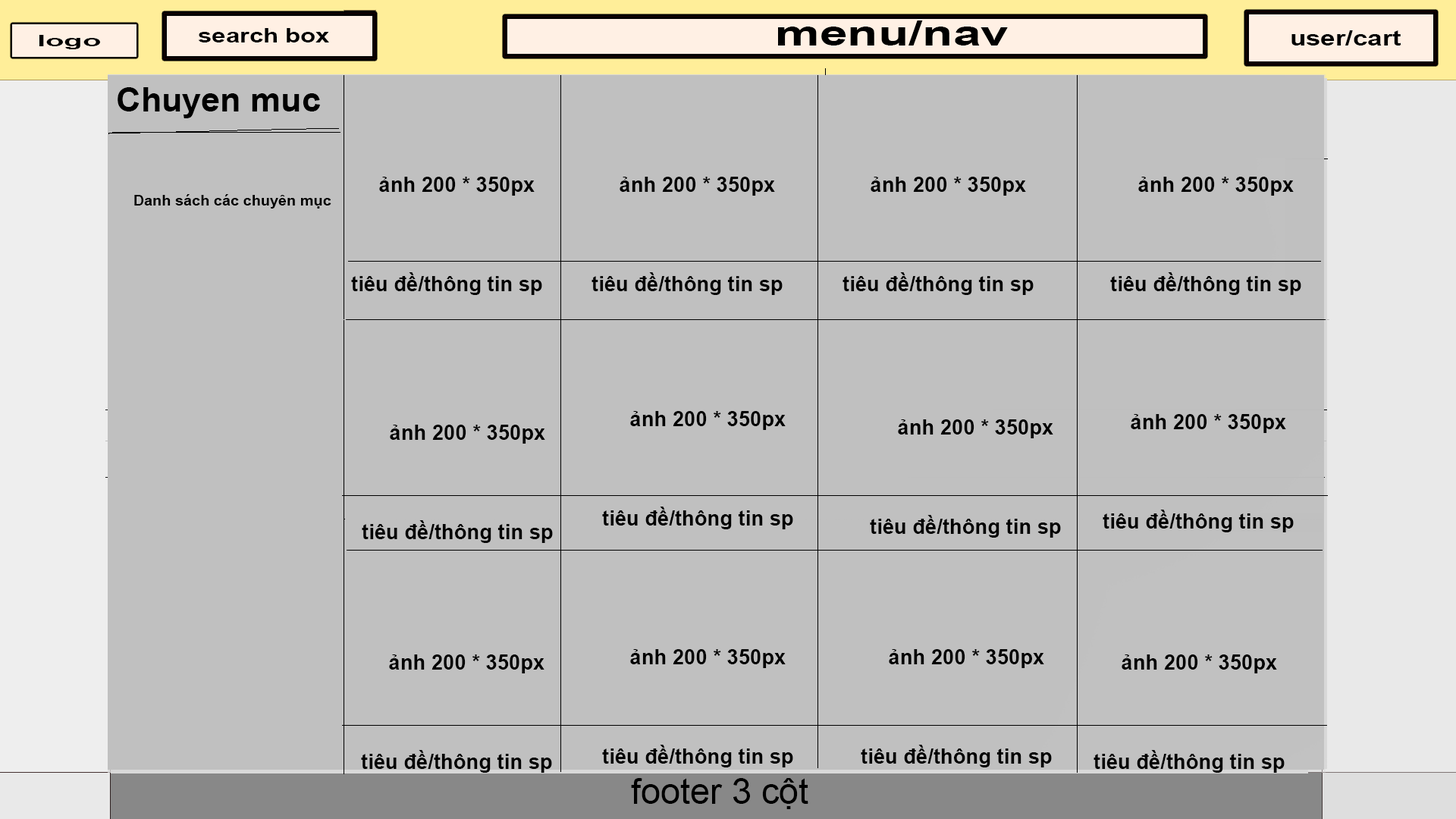
<style>
.page{position:relative;width:1456px;height:819px;background:#c0c0c0}
.page>*{position:absolute;margin:0}
.t1{font:19.7px "Arial-BoldMT";color:#000000;scale:1.27 1}
.t2{font:35px "Arial-BoldMT";color:#000000;scale:1.43 1}
.t3{font:15.1px "Arial-BoldMT";color:#000000;scale:2.02 1}
.t4{font:21.2px "Arial-BoldMT";color:#000000;scale:1.25 1}
.t5{font:33.1px "Arial-BoldMT";color:#000000;scale:1.03 1}
.t6{font:20.2px "Arial-BoldMT";color:#000000;scale:1.03 1}
.t7{font:14.6px "Arial-BoldMT";color:#000000;scale:1.03 1}
.t8{font:35.6px "ArialMT";color:#000000}
</style>
<div class="page">
<p class="t1" style="left:198px;top:28px;width:131px;height:14px">search box</p>
<p class="t2" style="left:778px;top:20px;width:230px;height:25px">menu/nav</p>
<p class="t3" style="left:39px;top:35px;width:61px;height:14px">logo</p>
<p class="t4" style="left:1291px;top:30px;width:110px;height:15px">user/cart</p>
<p class="t5" style="left:118px;top:87px;width:202px;height:31px">Chuyen muc</p>
<p class="t6" style="left:379px;top:177px;width:156px;height:19px">ảnh 200 * 350px</p>
<p class="t6" style="left:620px;top:177px;width:155px;height:19px">ảnh 200 * 350px</p>
<p class="t6" style="left:871px;top:177px;width:155px;height:19px">ảnh 200 * 350px</p>
<p class="t6" style="left:1138px;top:177px;width:156px;height:19px">ảnh 200 * 350px</p>
<p class="t7" style="left:134px;top:194px;width:197px;height:15px">Danh sách các chuyên mục</p>
<p class="t6" style="left:351px;top:272px;width:191px;height:23px">tiêu đề/thông tin sp</p>
<p class="t6" style="left:591px;top:272px;width:192px;height:23px">tiêu đề/thông tin sp</p>
<p class="t6" style="left:842px;top:272px;width:192px;height:23px">tiêu đề/thông tin sp</p>
<p class="t6" style="left:1110px;top:272px;width:191px;height:23px">tiêu đề/thông tin sp</p>
<p class="t6" style="left:630px;top:411px;width:156px;height:19px">ảnh 200 * 350px</p>
<p class="t6" style="left:390px;top:425px;width:155px;height:19px">ảnh 200 * 350px</p>
<p class="t6" style="left:898px;top:419px;width:155px;height:19px">ảnh 200 * 350px</p>
<p class="t6" style="left:1131px;top:414px;width:155px;height:19px">ảnh 200 * 350px</p>
<p class="t6" style="left:602px;top:507px;width:191px;height:22px">tiêu đề/thông tin sp</p>
<p class="t6" style="left:1103px;top:510px;width:191px;height:22px">tiêu đề/thông tin sp</p>
<p class="t6" style="left:362px;top:520px;width:191px;height:23px">tiêu đề/thông tin sp</p>
<p class="t6" style="left:870px;top:515px;width:191px;height:23px">tiêu đề/thông tin sp</p>
<p class="t6" style="left:630px;top:649px;width:156px;height:19px">ảnh 200 * 350px</p>
<p class="t6" style="left:889px;top:649px;width:155px;height:19px">ảnh 200 * 350px</p>
<p class="t6" style="left:389px;top:654px;width:155px;height:19px">ảnh 200 * 350px</p>
<p class="t6" style="left:1122px;top:654px;width:155px;height:19px">ảnh 200 * 350px</p>
<p class="t6" style="left:361px;top:750px;width:191px;height:23px">tiêu đề/thông tin sp</p>
<p class="t6" style="left:602px;top:745px;width:191px;height:22px">tiêu đề/thông tin sp</p>
<p class="t6" style="left:861px;top:745px;width:191px;height:22px">tiêu đề/thông tin sp</p>
<p class="t6" style="left:1094px;top:750px;width:191px;height:23px">tiêu đề/thông tin sp</p>
<p class="t8" style="left:631px;top:778px;width:177px;height:31px">footer 3 cột</p>
</div>
